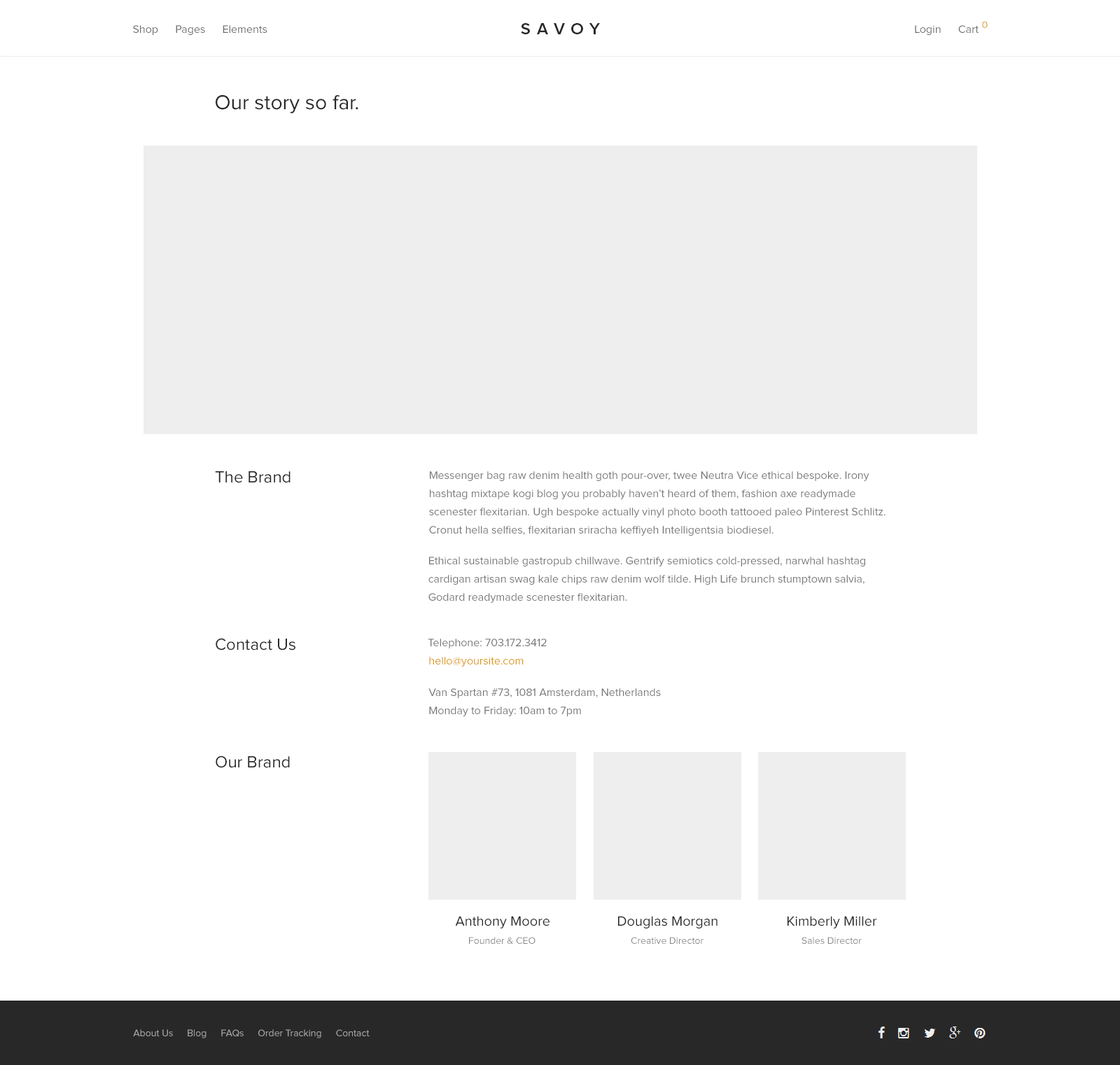
<style>
.page{position:relative;width:1120px;height:1065px;background:#ffffff}
.page>*{position:absolute;margin:0}
.t1{font:11.2px "ProximaNova-Regular";color:#707070}
.t2{font:16.8px "ProximaNova-Semibold";letter-spacing:0.37em;color:#282828;text-transform:uppercase}
.t3{font:9.8px "ProximaNova-Regular";color:#dc9814}
.t4{font:21px "ProximaNova-Regular";color:#282828}
.t5{font:16.8px "ProximaNova-Regular";color:#282828}
.t6{font:11.2px/18.2px "ProximaNova-Regular";color:#777777}
.t7{font:11.2px "ProximaNova-Regular";color:#777777}
.t8{font:11.2px "ProximaNova-Regular";color:#dc9814}
.t9{font:14px "ProximaNova-Regular";color:#282828}
.t10{font:9.8px "ProximaNova-Regular";color:#888888}
.t11{font:9.8px "ProximaNova-Regular";color:#aaaaaa}
</style>
<div class="page">
<p class="t1" style="left:133px;top:25px;width:25px;height:10px">Shop</p>
<p class="t1" style="left:176px;top:25px;width:29px;height:10px">Pages</p>
<p class="t1" style="left:223px;top:25px;width:44px;height:8px">Elements</p>
<p class="t2" style="left:521px;top:23px;width:79px;height:11px">savoy</p>
<p class="t1" style="left:915px;top:25px;width:26px;height:10px">Login</p>
<p class="t1" style="left:958px;top:25px;width:21px;height:8px">Cart</p>
<p class="t3" style="left:982px;top:21px;width:6px;height:7px">0</p>
<p class="t4" style="left:216px;top:94px;width:142px;height:19px">Our story so far.</p>
<p class="t5" style="left:215px;top:471px;width:75px;height:12px">The Brand</p>
<p class="t6" style="left:429px;top:471px;width:456px;height:64px;text-align:right">Messenger bag raw denim health goth pour-over, twee Neutra Vice ethical bespoke. Irony<br>hashtag mixtape kogi blog you probably haven’t heard of them, fashion axe readymade<br>scenester flexitarian. Ugh bespoke actually vinyl photo booth tattooed paleo Pinterest Schlitz.<br>Cronut hella selfies, flexitarian sriracha keffiyeh Intelligentsia biodiesel.</p>
<p class="t6" style="left:428px;top:556px;width:437px;height:47px;text-align:right">Ethical sustainable gastropub chillwave. Gentrify semiotics cold-pressed, narwhal hashtag<br>cardigan artisan swag kale chips raw denim wolf tilde. High Life brunch stumptown salvia,<br>Godard readymade scenester flexitarian.</p>
<p class="t5" style="left:216px;top:638px;width:79px;height:12px">Contact Us</p>
<p class="t7" style="left:428px;top:638px;width:119px;height:10px">Telephone: 703.172.3412</p>
<p class="t8" style="left:429px;top:657px;width:95px;height:9px">hello@yoursite.com</p>
<p class="t6" style="left:428px;top:688px;width:233px;height:28px;text-align:right">Van Spartan #73, 1081 Amsterdam, Netherlands<br>Monday to Friday: 10am to 7pm</p>
<p class="t5" style="left:216px;top:755px;width:74px;height:13px">Our Brand</p>
<p class="t9" style="left:455px;top:916px;width:94px;height:12px">Anthony Moore</p>
<p class="t9" style="left:618px;top:916px;width:99px;height:12px">Douglas Morgan</p>
<p class="t9" style="left:787px;top:916px;width:90px;height:12px">Kimberly Miller</p>
<p class="t10" style="left:469px;top:937px;width:66px;height:7px">Founder &amp; CEO</p>
<p class="t10" style="left:631px;top:937px;width:72px;height:7px">Creative Director</p>
<p class="t10" style="left:801px;top:937px;width:61px;height:7px">Sales Director</p>
<p class="t11" style="left:133px;top:1029px;width:40px;height:7px">About Us</p>
<p class="t11" style="left:188px;top:1029px;width:18px;height:9px">Blog</p>
<p class="t11" style="left:221px;top:1029px;width:23px;height:8px">FAQs</p>
<p class="t11" style="left:258px;top:1029px;width:63px;height:9px">Order Tracking</p>
<p class="t11" style="left:336px;top:1029px;width:34px;height:7px">Contact</p>
</div>
